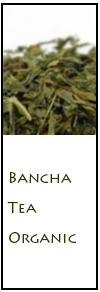
<style>
.page{position:relative;width:100px;height:292px;background:#ffffff}
.page>*{position:absolute;margin:0}
.t1{font:15px/30px "LithosPro-Regular";color:#333300}
</style>
<div class="page">
<p class="t1" style="left:7px;top:172px;width:69px;height:71px">Bancha<br>Tea<br>Organic</p>
</div>
